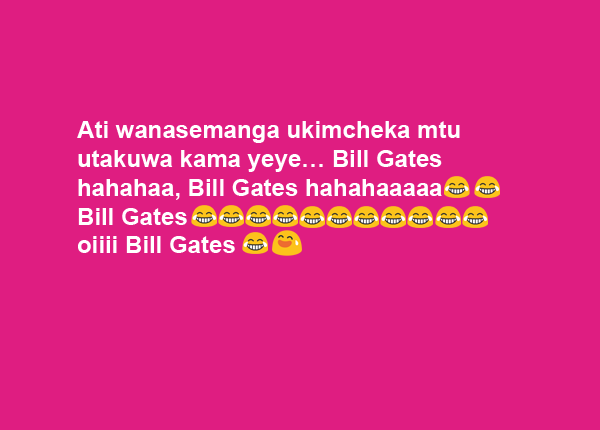
<style>
.page{position:relative;width:600px;height:430px;background:#df1d81}
.page>*{position:absolute;margin:0}
.t1{font:24px "Arial-BoldMT";color:#ffffff}
</style>
<div class="page">
<p class="t1" style="left:77px;top:121px;width:383px;height:132px">Ati wanasemanga ukimcheka mtu <br>utakuwa kama yeye… Bill Gates <br>hahahaa, Bill Gates hahahaaaaa <br>Bill Gates <br>oiiii Bill Gates</p>
</div>
